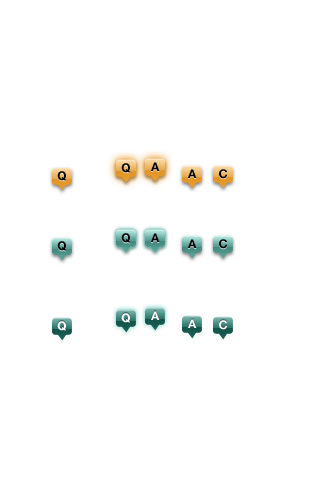
<style>
.page{position:relative;width:320px;height:480px;background:#ffffff}
.page>*{position:absolute;margin:0}
.t1{font:12px "HelveticaNeue-Bold";color:#000000}
.t2{font:12px "HelveticaNeue-Bold";color:#ffffff}
</style>
<div class="page">
<p class="t1" style="left:57px;top:171px;width:9px;height:10px">Q</p>
<p class="t1" style="left:121px;top:163px;width:9px;height:10px">Q</p>
<p class="t1" style="left:151px;top:162px;width:9px;height:9px">A</p>
<p class="t1" style="left:188px;top:169px;width:9px;height:9px">A</p>
<p class="t1" style="left:219px;top:169px;width:8px;height:10px">C</p>
<p class="t1" style="left:121px;top:233px;width:9px;height:10px">Q</p>
<p class="t1" style="left:151px;top:233px;width:9px;height:9px">A</p>
<p class="t1" style="left:57px;top:241px;width:9px;height:10px">Q</p>
<p class="t1" style="left:188px;top:239px;width:9px;height:9px">A</p>
<p class="t1" style="left:219px;top:239px;width:8px;height:10px">C</p>
<p class="t2" style="left:121px;top:313px;width:9px;height:10px">Q</p>
<p class="t2" style="left:151px;top:311px;width:9px;height:9px">A</p>
<p class="t2" style="left:57px;top:321px;width:9px;height:10px">Q</p>
<p class="t2" style="left:188px;top:319px;width:9px;height:9px">A</p>
<p class="t2" style="left:219px;top:320px;width:8px;height:10px">C</p>
</div>
